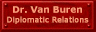
<style>
.page{position:relative;width:96px;height:32px}
.page>*{position:absolute;margin:0}
.t1{font:7.6px/9.3px "Verdana";color:#ff9c7b;font-weight:bold}
.t2{font:8.9px/9.3px "Verdana-Bold";color:#ff9c7b}
</style>
<div class="page">
<p class="t1" style="left:7px;top:6px;width:82px;height:18px;text-align:center"><span class="t2">Dr. Van Buren<br></span>Diplomatic Relations</p>
</div>
